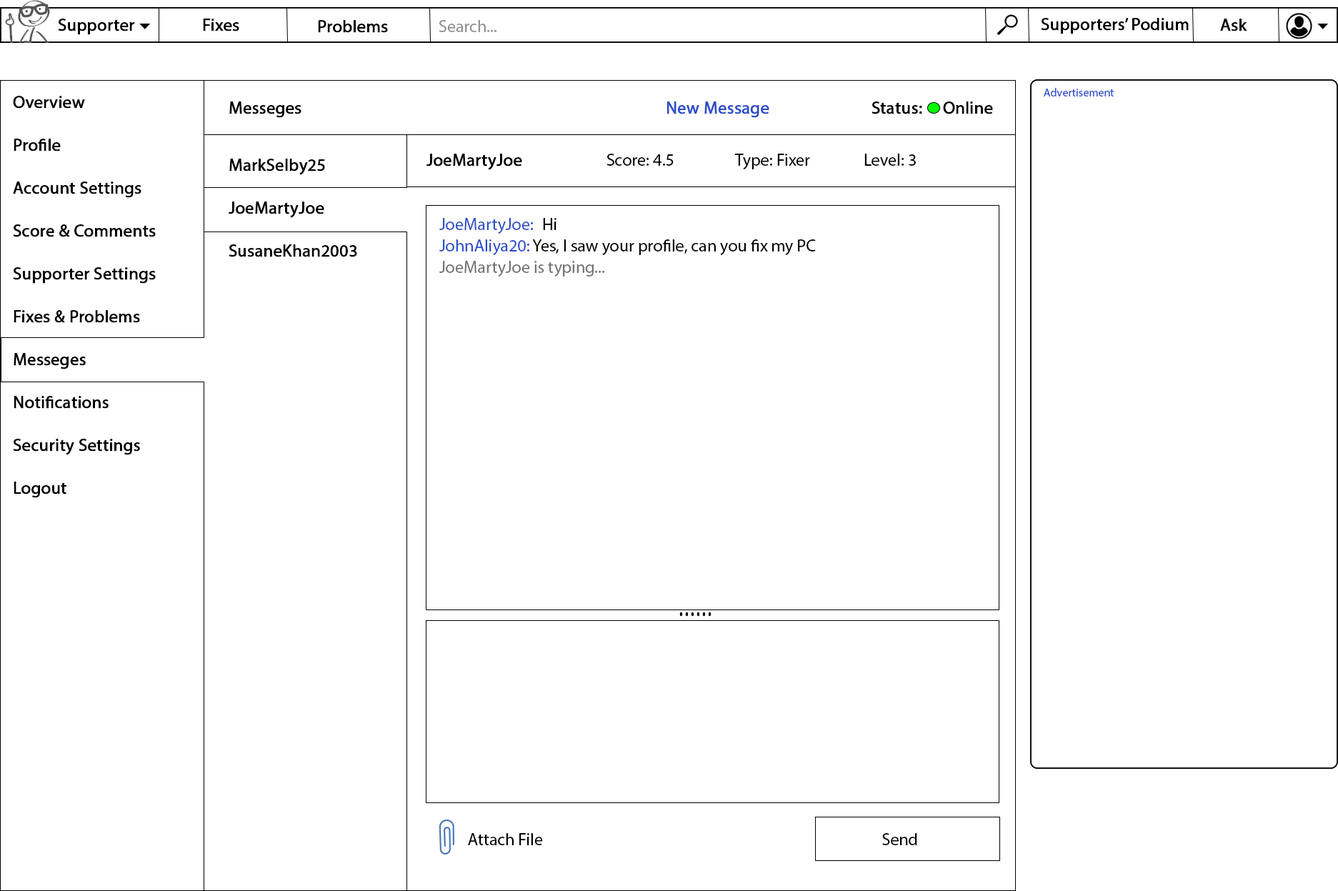
<style>
.page{position:relative;width:1338px;height:891px;background:#ffffff}
.page>*{position:absolute;margin:0}
.t1{font:17.1px "MyriadPro-Regular";color:#010000;font-weight:bold}
.t2{font:17.1px "MyriadPro-Regular";color:#000000;font-weight:bold}
.t3{font:17.1px "MyriadPro-Regular";color:#919090}
.t4{font:11.4px "MyriadPro-Regular";color:#2d4fc9}
.t5{font:17.1px/42.9px "MyriadPro-Regular";color:#000000;font-weight:bold}
.t6{font:17.1px "MyriadPro-Regular";color:#2d4fc9;font-weight:bold}
.t7{font:17.1px "MyriadPro-Regular";color:#000000}
.t8{font:17.1px/21.4px "MyriadPro-Regular";color:#000000}
.t9{font:17.1px/42.9px "MyriadPro-Regular";color:#2d4fc9}
.t10{font:17.1px/42.9px "MyriadPro-Regular";color:#000000}
.t11{font:17.1px/21.4px "MyriadPro-Regular";color:#2d4fc9}
.t12{font:17.1px/21.4px "MyriadPro-Regular";color:#747474}
.t13{font:33.5px "Calibri";color:#000000;scale:0.67 1}
</style>
<div class="page">
<p class="t1" style="left:1041px;top:18px;width:148px;height:16px">Supporters’ Podium</p>
<p class="t2" style="left:58px;top:19px;width:77px;height:16px">Supporter</p>
<p class="t2" style="left:203px;top:19px;width:36px;height:12px">Fixes</p>
<p class="t2" style="left:318px;top:20px;width:70px;height:13px">Problems</p>
<p class="t3" style="left:439px;top:20px;width:58px;height:12px">Search...</p>
<p class="t2" style="left:1220px;top:19px;width:28px;height:12px">Ask</p>
<p class="t4" style="left:1044px;top:88px;width:70px;height:8px">Advertisement</p>
<p class="t5" style="left:13px;top:96px;width:143px;height:402px">Overview<br>Profile<br>Account Settings<br>Score &amp; Comments<br>Supporter Settings<br>Fixes &amp; Problems<br>Messeges<br>Notifications<br>Security Settings<br>Logout</p>
<p class="t2" style="left:229px;top:101px;width:764px;height:17px">Messeges               <span class="t6">New Message</span>    Status:     Online</p>
<p class="t5" style="left:229px;top:159px;width:128px;height:98px">MarkSelby25<br>JoeMartyJoe<br>SusaneKhan2003</p>
<p class="t7" style="left:427px;top:154px;width:489px;height:16px"><span class="t2">JoeMartyJoe    </span>Score: 4.5   Type: Fixer   Level: 3</p>
<p class="t8" style="left:439px;top:218px;width:377px;height:59px"><span class="t9">JoeMartyJoe: </span><span class="t10">Hi<br></span><span class="t11">JohnAliya20:</span> Yes, I saw your profile, can you fix my PC<br><span class="t12">JoeMartyJoe is typing...</span></p>
<p class="t13" style="left:680px;top:612px;width:32px;height:5px">......</p>
<p class="t7" style="left:468px;top:833px;width:75px;height:12px">Attach File</p>
<p class="t7" style="left:882px;top:833px;width:35px;height:12px">Send</p>
</div>
